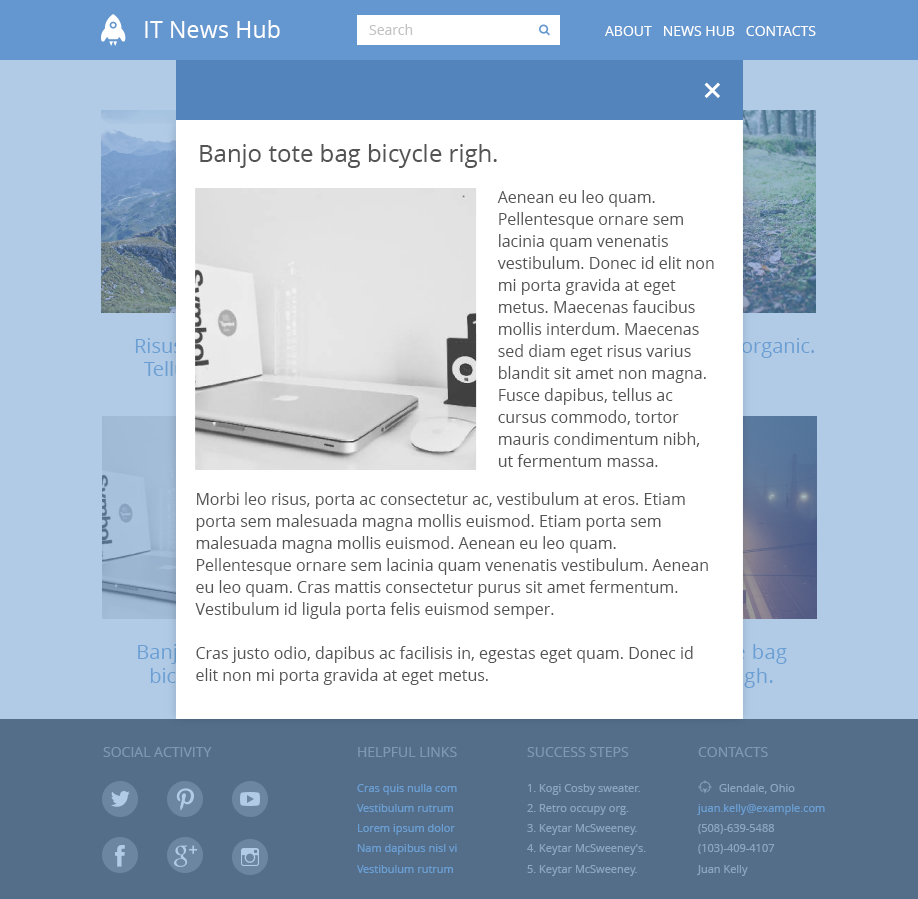
<style>
.page{position:relative;width:918px;height:899px;background:#ffffff}
.page>*{position:absolute;margin:0}
.t1{font:23.4px "OpenSans";color:#ffffff}
.t2{font:14px "OpenSans";color:#c3c3c3}
.t3{font:14px "OpenSans";letter-spacing:-0.017em;color:#c3c3c3}
.t4{font:14px "OpenSans";color:#ffffff}
.t5{font:14px "OpenSans";letter-spacing:-0.067em;color:#ffffff}
.t6{font:24px "OpenSans";color:#545454}
.t7{font:16px/22px "OpenSans";color:#545454}
.t8{font:14px "OpenSans";color:#7e97b4}
.t9{font:14px "OpenSans";letter-spacing:-0.067em;color:#7e97b4}
.t10{font:11px "OpenSans";color:#72a8d8}
.t11{font:11px "OpenSans";color:#8ca5c2}
.t12{font:11px "OpenSans";letter-spacing:-0.091em;color:#8ca5c2}
.t13{font:11px "OpenSans";letter-spacing:-0.054em;color:#72a8d8}
.t14{font:11px "OpenSans";letter-spacing:-0.017em;color:#8ca5c2}
.t15{font:11px "OpenSans";letter-spacing:-0.017em;color:#72a8d8}
.t16{font:11px "OpenSans";letter-spacing:-0.092em;color:#8ca5c2}
</style>
<div class="page">
<p class="t1" style="left:145px;top:20px;width:135px;height:18px">IT News Hub</p>
<p class="t2" style="left:369px;top:24px;width:44px;height:11px">Sea<span class="t3">r</span>ch</p>
<p class="t4" style="left:605px;top:26px;width:211px;height:10px">ABOUT   NEWS HUB   CON<span class="t5">T</span>ACTS</p>
<p class="t6" style="left:200px;top:144px;width:297px;height:24px">Banjo tote bag bicycle righ.</p>
<p class="t7" style="left:497px;top:190px;width:217px;height:277px">Aenean eu leo quam. Pellentesque ornare sem lacinia quam venenatis vestibulum. Donec id elit non mi porta gravida at eget metus. Maecenas faucibus mollis interdum. Maecenas sed diam eget risus varius blandit sit amet non magna. Fusce dapibus, tellus ac cursus commodo, tortor mauris condimentum nibh, ut fermentum massa. justo.amet risus.mauris condimentum nibh, ut fermentum massa justo sit amet risus.</p>
<p class="t7" style="left:195px;top:492px;width:513px;height:193px">Morbi leo risus, porta ac consectetur ac, vestibulum at eros. Etiam porta sem malesuada magna mollis euismod. Etiam porta sem malesuada magna mollis euismod. Aenean eu leo quam. Pellentesque ornare sem lacinia quam venenatis vestibulum. Aenean eu leo quam. Cras mattis consectetur purus sit amet fermentum. Vestibulum id ligula porta felis euismod semper.<br><br>Cras justo odio, dapibus ac facilisis in, egestas eget quam. Donec id elit non mi porta gravida at eget metus.</p>
<p class="t8" style="left:103px;top:747px;width:109px;height:10px">SOCIAL ACTIVITY</p>
<p class="t8" style="left:358px;top:747px;width:99px;height:10px">HELPFUL LINKS</p>
<p class="t8" style="left:527px;top:747px;width:102px;height:10px">SUCCESS STEPS</p>
<p class="t8" style="left:698px;top:747px;width:70px;height:10px">CON<span class="t9">T</span>ACTS</p>
<p class="t10" style="left:357px;top:784px;width:100px;height:11px">Cras quis nulla com</p>
<p class="t11" style="left:528px;top:784px;width:112px;height:11px">1. Kogi Cosby sweate<span class="t12">r</span>.</p>
<p class="t11" style="left:719px;top:784px;width:76px;height:10px">Glendale, Ohio</p>
<p class="t10" style="left:357px;top:804px;width:96px;height:8px"><span class="t13">V</span>estibulum rutrum</p>
<p class="t11" style="left:527px;top:804px;width:102px;height:11px">2. Ret<span class="t14">r</span>o occupy org.</p>
<p class="t10" style="left:697px;top:804px;width:128px;height:11px">juan.kelly@example.com</p>
<p class="t10" style="left:358px;top:824px;width:97px;height:11px">Lo<span class="t15">r</span>em ipsum dolor</p>
<p class="t11" style="left:527px;top:824px;width:110px;height:11px">3. Keytar McSweene<span class="t16">y</span>.</p>
<p class="t11" style="left:698px;top:824px;width:77px;height:10px">(508)-639-5488</p>
<p class="t10" style="left:357px;top:844px;width:100px;height:11px">Nam dapibus nisl vi</p>
<p class="t11" style="left:527px;top:844px;width:119px;height:11px">4. Keytar McSweeney's.</p>
<p class="t11" style="left:698px;top:844px;width:77px;height:10px">(103)-409-4107</p>
<p class="t10" style="left:357px;top:865px;width:96px;height:8px"><span class="t13">V</span>estibulum rutrum</p>
<p class="t11" style="left:527px;top:865px;width:110px;height:11px">5. Keytar McSweene<span class="t16">y</span>.</p>
<p class="t11" style="left:697px;top:865px;width:51px;height:11px">Juan Kelly</p>
</div>
